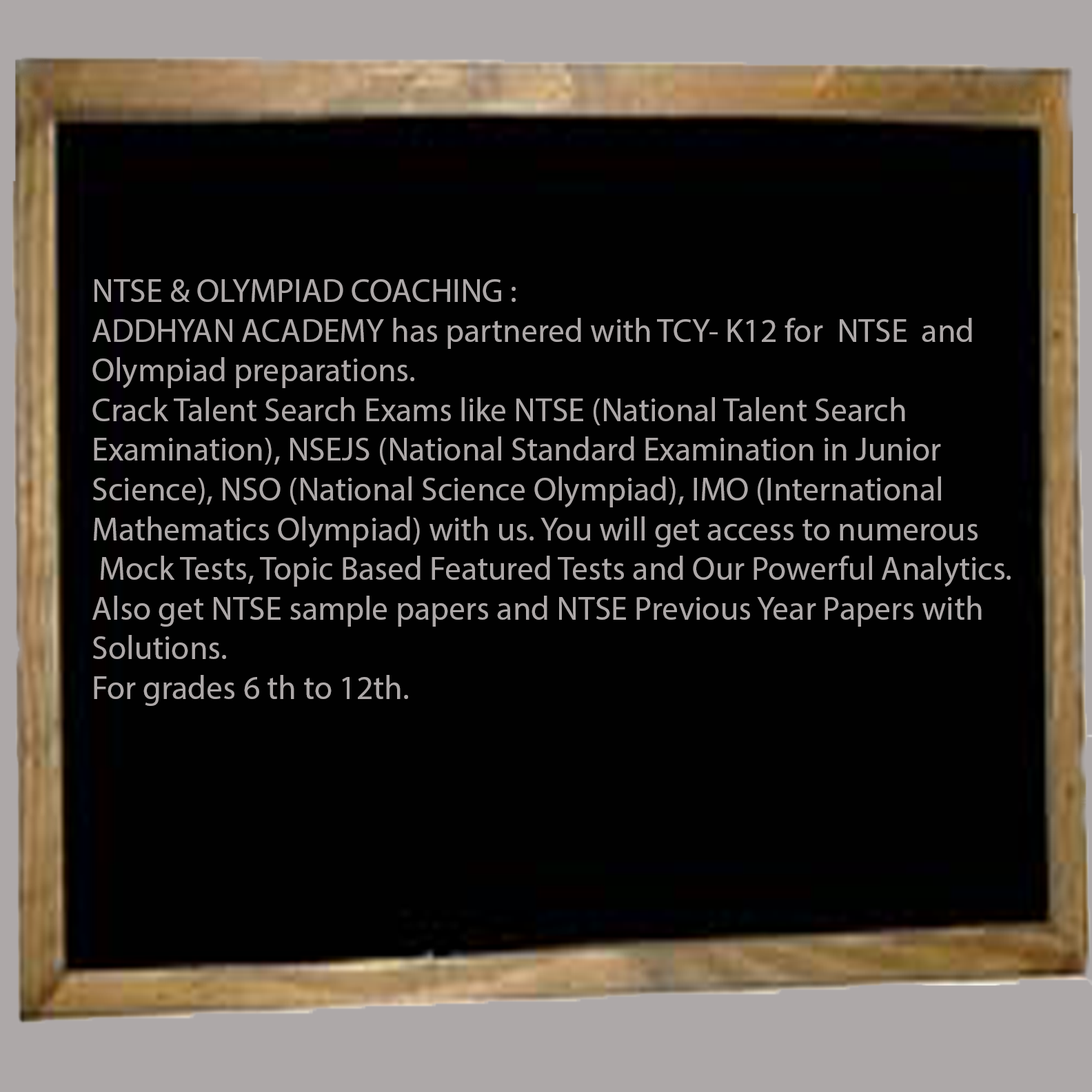
<style>
.page{position:relative;width:1092px;height:1092px;background:#010101}
.page>*{position:absolute;margin:0}
.t1{font:33.1px "MyriadPro-Regular";color:#ada8a8}
</style>
<div class="page">
<p class="t1" style="left:92px;top:279px;width:919px;height:427px">NTSE &amp; OLYMPIAD COACHING :<br>ADDHYAN ACADEMY has partnered with TCY- K12 for  NTSE  and <br>Olympiad preparations.<br>Crack Talent Search Exams like NTSE (National Talent Search <br>Examination), NSEJS (National Standard Examination in Junior <br>Science), NSO (National Science Olympiad), IMO (International <br>Mathematics Olympiad) with us. You will get access to numerous<br> Mock Tests, Topic Based Featured Tests and Our Powerful Analytics. <br>Also get NTSE sample papers and NTSE Previous Year Papers with <br>Solutions.<br>For grades 6 th to 12th.</p>
</div>
